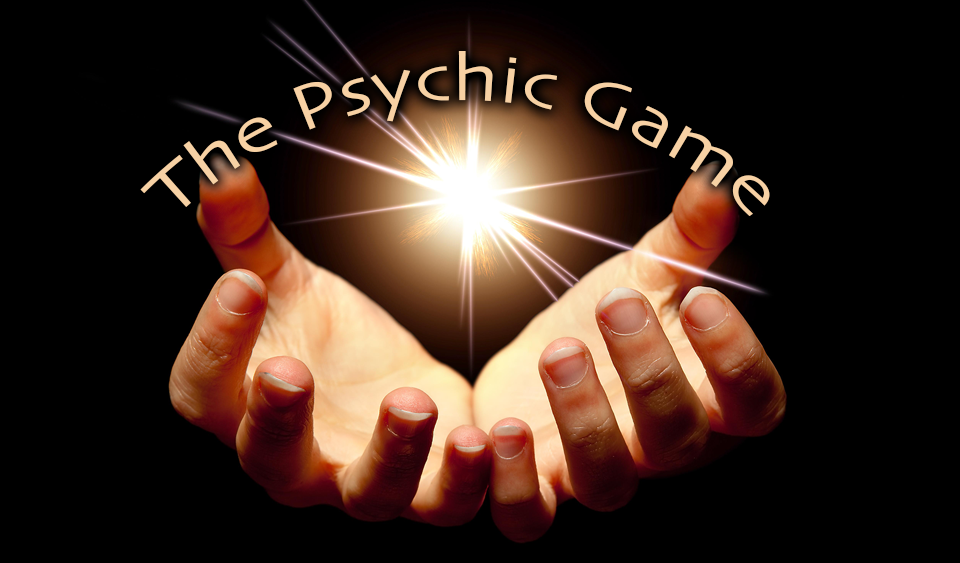
<style>
.page{position:relative;width:960px;height:563px;background:#000000}
.page>*{position:absolute;margin:0}
.t1{font:68px/35px "Skia-Regular";color:#f7d1a4}
</style>
<div class="page">
<p class="t1" style="left:140px;top:51px;width:630px;height:166px;text-align:center">The Psychic Game</p>
</div>
